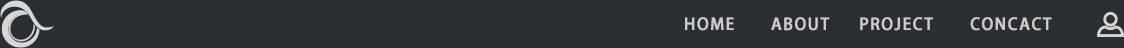
<style>
.page{position:relative;width:1124px;height:48px;background:#2b2f31}
.page>*{position:absolute;margin:0}
.t1{font:16px "AdobeFanHeitiStd-Bold";letter-spacing:0.075em;color:#cccccc;font-weight:bold}
</style>
<div class="page">
<p class="t1" style="left:685px;top:17px;width:49px;height:14px">HOME</p>
<p class="t1" style="left:771px;top:17px;width:59px;height:14px">ABOUT</p>
<p class="t1" style="left:860px;top:17px;width:73px;height:14px">PROJECT</p>
<p class="t1" style="left:970px;top:17px;width:82px;height:14px">CONCACT</p>
</div>
